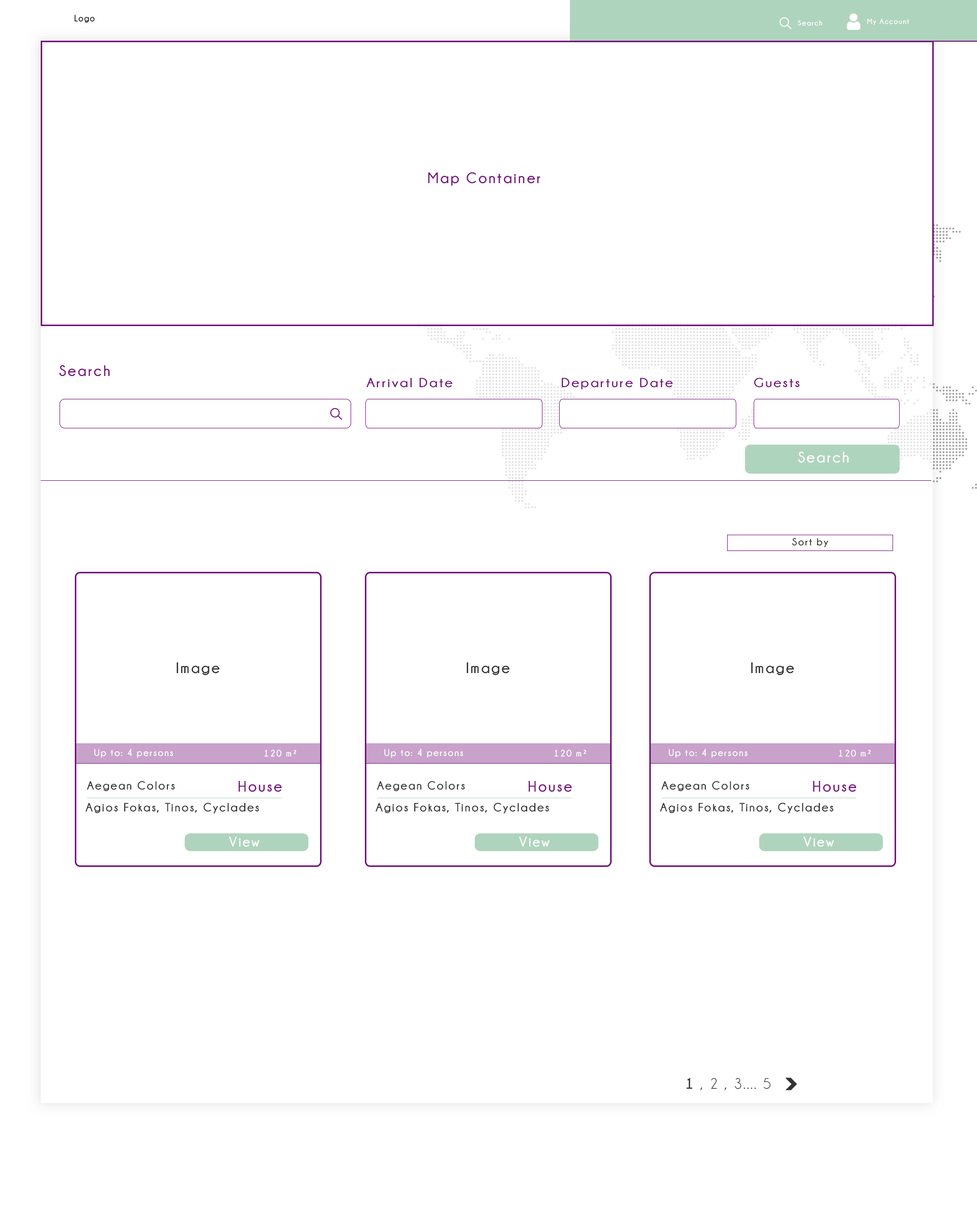
<style>
.page{position:relative;width:977px;height:1221px;background:#ffffff}
.page>*{position:absolute;margin:0}
.t1{font:9.2px "Champagne&Limousines-Bold";letter-spacing:0.1em;color:#000000;scale:0.94 1}
.t2{font:7.3px "Champagne&Limousines-Bold";letter-spacing:0.1em;color:#ffffff}
.t3{font:15.3px "Champagne&Limousines-Bold";letter-spacing:0.1em;color:#76167c}
.t4{font:13.3px "Champagne&Limousines-Bold";letter-spacing:0.1em;color:#76167c;scale:1.09 1}
.t5{font:15.3px "Champagne&Limousines-Bold";letter-spacing:0.1em;color:#ffffff}
.t6{font:10.3px "Champagne&Limousines-Bold";letter-spacing:0.1em;color:#333333}
.t7{font:15.3px "Champagne&Limousines-Bold";letter-spacing:0.1em;color:#333333}
.t8{font:9.7px "Champagne&Limousines-Bold";letter-spacing:0.1em;color:#ffffff}
.t9{font:9.6px "Champagne&Limousines-Bold";letter-spacing:0.1em;color:#ffffff}
.t10{font:11.9px "Champagne&Limousines-Bold";letter-spacing:0.1em;color:#333333}
.t11{font:12.2px "Champagne&Limousines-Bold";letter-spacing:0.1em;color:#333333}
.t12{font:13.9px "Champagne&Limousines-Bold";letter-spacing:0.1em;color:#fefefe}
.t13{font:15.3px "Champagne&Limousines";letter-spacing:0.1em;color:#333333}
</style>
<div class="page">
<p class="t1" style="left:74px;top:15px;width:21px;height:8px">Logo</p>
<p class="t2" style="left:797px;top:20px;width:25px;height:6px">Search</p>
<p class="t2" style="left:867px;top:18px;width:42px;height:7px">My Account</p>
<p class="t3" style="left:428px;top:172px;width:112px;height:14px">Map Container</p>
<p class="t3" style="left:59px;top:365px;width:51px;height:11px">Search</p>
<p class="t4" style="left:366px;top:377px;width:86px;height:11px">Arrival Date</p>
<p class="t4" style="left:562px;top:377px;width:110px;height:12px">Departure Date</p>
<p class="t4" style="left:754px;top:377px;width:45px;height:11px">Guests</p>
<p class="t5" style="left:798px;top:451px;width:51px;height:12px">Search</p>
<p class="t6" style="left:792px;top:538px;width:36px;height:9px">Sort by</p>
<p class="t7" style="left:177px;top:662px;width:43px;height:13px">Image</p>
<p class="t7" style="left:466px;top:662px;width:44px;height:13px">Image</p>
<p class="t7" style="left:751px;top:662px;width:43px;height:13px">Image</p>
<p class="t8" style="left:94px;top:748px;width:79px;height:10px">Up to: 4 persons</p>
<p class="t9" style="left:264px;top:749px;width:32px;height:8px">120 m²</p>
<p class="t8" style="left:384px;top:748px;width:79px;height:10px">Up to: 4 persons</p>
<p class="t9" style="left:554px;top:749px;width:32px;height:8px">120 m²</p>
<p class="t8" style="left:668px;top:748px;width:79px;height:10px">Up to: 4 persons</p>
<p class="t9" style="left:838px;top:749px;width:32px;height:8px">120 m²</p>
<p class="t10" style="left:86px;top:781px;width:89px;height:10px">Aegean Colors</p>
<p class="t3" style="left:239px;top:781px;width:43px;height:11px">House</p>
<p class="t10" style="left:376px;top:781px;width:89px;height:10px">Aegean Colors</p>
<p class="t3" style="left:529px;top:781px;width:43px;height:11px">House</p>
<p class="t10" style="left:661px;top:781px;width:88px;height:10px">Aegean Colors</p>
<p class="t3" style="left:813px;top:781px;width:43px;height:11px">House</p>
<p class="t11" style="left:85px;top:803px;width:174px;height:10px">Agios Fokas, Tinos, Cyclades</p>
<p class="t11" style="left:375px;top:803px;width:174px;height:10px">Agios Fokas, Tinos, Cyclades</p>
<p class="t11" style="left:660px;top:803px;width:173px;height:10px">Agios Fokas, Tinos, Cyclades</p>
<p class="t12" style="left:229px;top:836px;width:30px;height:11px">View</p>
<p class="t12" style="left:519px;top:836px;width:30px;height:11px">View</p>
<p class="t12" style="left:803px;top:836px;width:31px;height:11px">View</p>
<p class="t13" style="left:686px;top:1077px;width:85px;height:13px"><span class="t7">1 </span>, 2 , 3.... 5</p>
</div>
